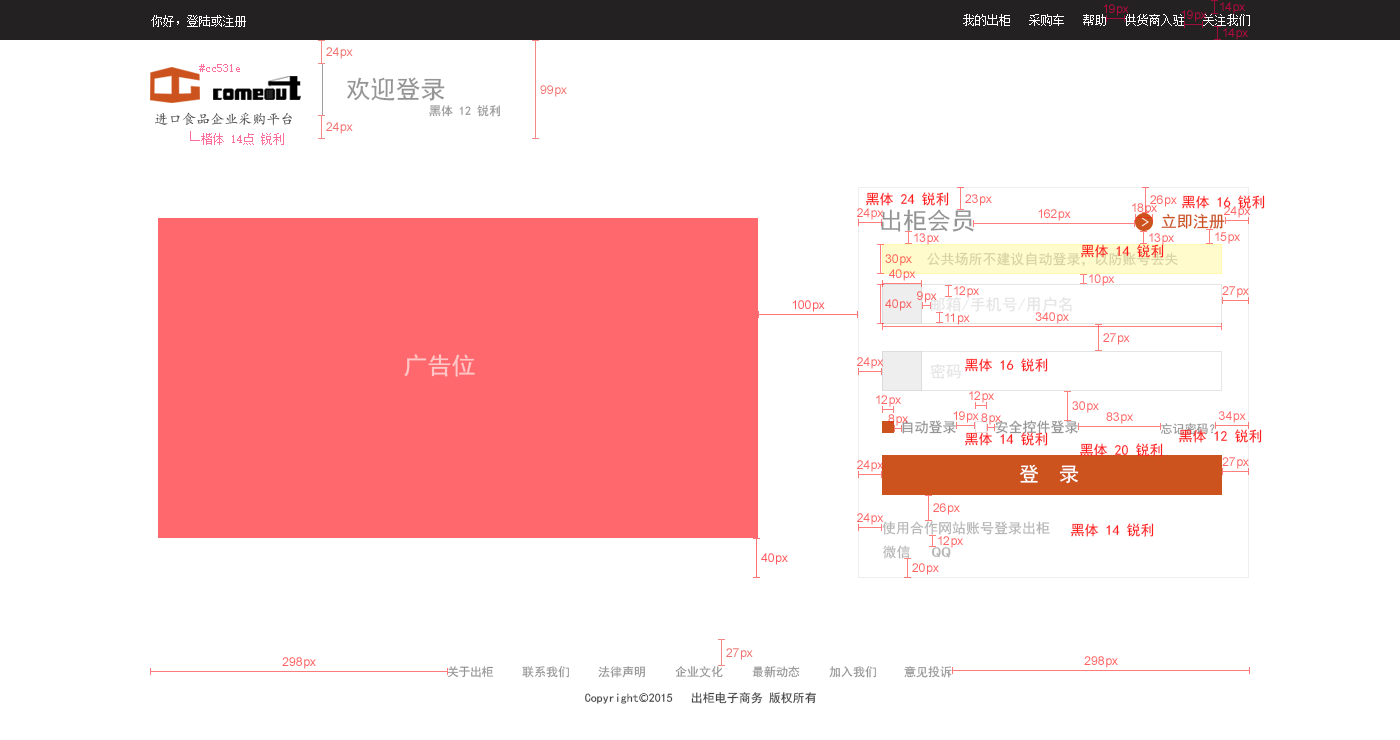
<style>
.page{position:relative;width:1400px;height:740px;background:#ffffff}
.page>*{position:absolute;margin:0}
.t1{font:12px "SimSun";color:#ffffff}
.t2{font:12px "SimSun";color:#fc6f9a}
.t3{font:25px "SimHei";color:#959495}
.t4{font:14px "¿¬Ìå";color:#464343}
.t5{font:12px "SimHei";color:#959495}
.t6{font:14px "SimHei";color:#ff1c1c}
.t7{font:24px "SimHei";color:#959495}
.t8{font:16px "SimHei";color:#cc531e}
.t9{font:14px "SimHei";color:#d6d2a3}
.t10{font:16px "SimHei";color:#e5e5e5}
.t11{font:24px "SimHei";color:#ffc6c7}
.t12{font:14px "SimHei";color:#959495}
.t13{font:20px "SimHei";color:#ffffff}
.t14{font:14px "SimHei";color:#b5b5b5}
.t15{font:14px "SimHei";color:#b5b5b5;scale:1.41 1}
.t16{font:12px "SimHei";color:#434343}
.t17{font:12px "SourceHanSansCN-Light";color:#434343}
</style>
<div class="page">
<p class="t1" style="left:151px;top:15px;width:95px;height:12px">你好，登陆或注册</p>
<p class="t1" style="left:963px;top:14px;width:287px;height:12px">我的出柜   采购车   帮助   供货商入驻   关注我们</p>
<p class="t2" style="left:199px;top:64px;width:41px;height:8px">#cc531e</p>
<p class="t3" style="left:347px;top:77px;width:98px;height:24px">欢迎登录</p>
<p class="t4" style="left:154px;top:112px;width:138px;height:14px">进口食品企业采购平台</p>
<p class="t5" style="left:429px;top:105px;width:71px;height:12px">黑体 12 锐利</p>
<p class="t6" style="left:865px;top:192px;width:84px;height:14px">黑体 24 锐利</p>
<p class="t6" style="left:1181px;top:195px;width:84px;height:14px">黑体 16 锐利</p>
<p class="t7" style="left:881px;top:209px;width:93px;height:23px">出柜会员</p>
<p class="t8" style="left:1161px;top:213px;width:64px;height:16px">立即注册</p>
<p class="t6" style="left:1080px;top:244px;width:84px;height:14px">黑体 14 锐利</p>
<p class="t9" style="left:927px;top:252px;width:251px;height:15px">公共场所不建议自动登录，以防账号丢失</p>
<p class="t10" style="left:931px;top:296px;width:141px;height:16px">邮箱/手机号/用户名</p>
<p class="t11" style="left:404px;top:354px;width:71px;height:23px">广告位</p>
<p class="t10" style="left:930px;top:363px;width:31px;height:16px">密码</p>
<p class="t6" style="left:964px;top:358px;width:84px;height:14px">黑体 16 锐利</p>
<p class="t12" style="left:902px;top:420px;width:54px;height:14px">自动登录</p>
<p class="t12" style="left:995px;top:420px;width:83px;height:14px">安全控件登录</p>
<p class="t5" style="left:1161px;top:423px;width:54px;height:12px">忘记密码？</p>
<p class="t6" style="left:964px;top:432px;width:84px;height:14px">黑体 14 锐利</p>
<p class="t6" style="left:1178px;top:429px;width:84px;height:14px">黑体 12 锐利</p>
<p class="t6" style="left:1079px;top:443px;width:84px;height:14px">黑体 20 锐利</p>
<p class="t13" style="left:1020px;top:464px;width:59px;height:20px">登  录</p>
<p class="t14" style="left:882px;top:521px;width:168px;height:14px">使用合作网站账号登录出柜</p>
<p class="t6" style="left:1070px;top:523px;width:84px;height:14px">黑体 14 锐利</p>
<p class="t14" style="left:883px;top:545px;width:27px;height:14px">微信</p>
<p class="t15" style="left:931px;top:547px;width:20px;height:11px">QQ</p>
<p class="t5" style="left:447px;top:666px;width:47px;height:12px">关于出柜</p>
<p class="t5" style="left:522px;top:666px;width:47px;height:12px">联系我们</p>
<p class="t5" style="left:598px;top:666px;width:47px;height:12px">法律声明</p>
<p class="t5" style="left:675px;top:666px;width:48px;height:12px">企业文化</p>
<p class="t5" style="left:752px;top:666px;width:48px;height:12px">最新动态</p>
<p class="t5" style="left:829px;top:666px;width:47px;height:12px">加入我们</p>
<p class="t5" style="left:904px;top:666px;width:48px;height:12px">意见投诉</p>
<p class="t16" style="left:585px;top:693px;width:88px;height:11px">Copyright<span class="t17">©</span>2015</p>
<p class="t16" style="left:691px;top:692px;width:72px;height:12px">出柜电子商务</p>
<p class="t16" style="left:769px;top:692px;width:47px;height:12px">版权所有</p>
</div>
